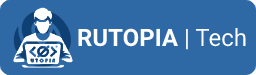
<style>
.page{position:relative;width:256px;height:75px;background:#2e69a6}
.page>*{position:absolute;margin:0}
.t1{font:24px "Roboto-Bold";color:#ffffff}
.t2{font:24px "Roboto-Regular";color:#ffffff}
</style>
<div class="page">
<p class="t1" style="left:78px;top:28px;width:168px;height:22px">RUTOPIA <span class="t2">| Tech</span></p>
</div>
